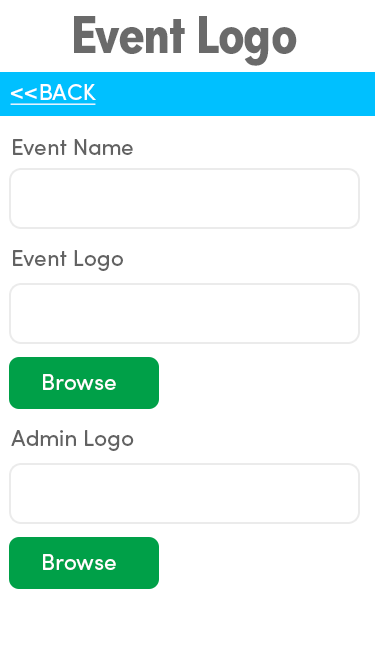
<style>
.page{position:relative;width:375px;height:667px;background:#ffffff}
.page>*{position:absolute;margin:0}
.t1{font:54.2px "SofiaProBoldCondensed";letter-spacing:-0.02em;color:#6a6a6a}
.t2{font:22.6px "SofiaProRegular";color:#ffffff;text-decoration:underline}
.t3{font:22.6px "SofiaProRegular";color:#626262}
.t4{font:22.6px "SofiaProRegular";color:#ffffff}
</style>
<div class="page">
<p class="t1" style="left:74px;top:16px;width:223px;height:50px">Event Logo</p>
<p class="t2" style="left:10px;top:84px;width:86px;height:21px">&lt;&lt;BACK</p>
<p class="t3" style="left:13px;top:139px;width:120px;height:16px">Event Name</p>
<p class="t3" style="left:13px;top:250px;width:110px;height:21px">Event Logo</p>
<p class="t4" style="left:43px;top:374px;width:73px;height:16px">Browse</p>
<p class="t3" style="left:11px;top:430px;width:123px;height:21px">Admin Logo</p>
<p class="t4" style="left:43px;top:554px;width:73px;height:16px">Browse</p>
</div>
